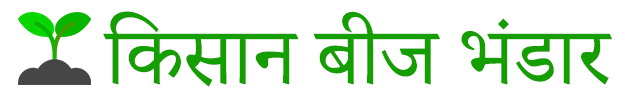
<style>
.page{position:relative;width:625px;height:101px;background:#ffffff}
.page>*{position:absolute;margin:0}
.t1{font:100px "AdobeDevanagari-Regular";color:#159e00}
</style>
<div class="page">
<p class="t1" style="left:103px;top:11px;width:509px;height:76px">िकसान बीज भंडार</p>
</div>
